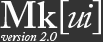
<style>
.page{position:relative;width:103px;height:42px;background:#333333}
.page>*{position:absolute;margin:0}
.t1{font:37.5px "ACaslonPro-Semibold";color:#fdfdfd}
.t2{font:37.5px "ACaslonPro-Regular";letter-spacing:-0.1em;color:#fdfdfd}
.t3{font:37.5px "ACaslonPro-Italic";letter-spacing:-0.1em;color:#fdfdfd}
.t4{font:37.5px "ACaslonPro-Italic";letter-spacing:-0.025em;color:#fdfdfd}
.t5{font:37.5px "ACaslonPro-Regular";letter-spacing:-0.025em;color:#fdfdfd}
.t6{font:13.3px "ACaslonPro-Italic";color:#fdfdfd}
</style>
<div class="page">
<p class="t1" style="left:0px;top:0px;width:101px;height:35px">Mk<span class="t2">[</span><span class="t3">u</span><span class="t4">i</span><span class="t5">]</span></p>
<p class="t6" style="left:1px;top:32px;width:56px;height:9px">version 2.0</p>
</div>
